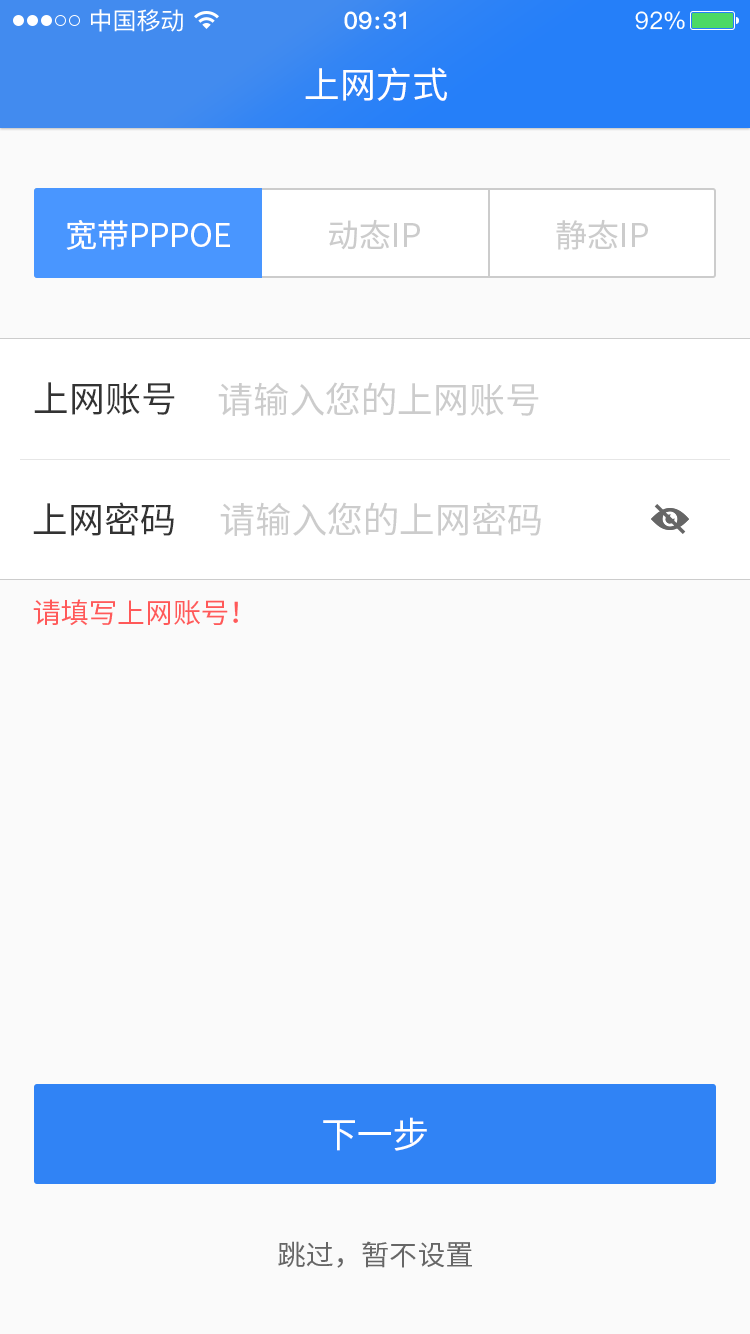
<style>
.page{position:relative;width:750px;height:1334px;background:#fafafa}
.page>*{position:absolute;margin:0}
.t1{font:36px "SourceHanSansCN-Regular";color:#ffffff}
.t2{font:32px "SourceHanSansCN-Regular";color:#ffffff}
.t3{font:32px "SourceHanSansCN-Regular";color:#cccccc}
.t4{font:36px "SourceHanSansCN-Regular";color:#333333}
.t5{font:36px "SourceHanSansCN-Regular";color:#cccccc}
.t6{font:28px "SourceHanSansCN-Regular";color:#ff5959}
.t7{font:28px "SourceHanSansCN-Regular";color:#666666}
</style>
<div class="page">
<p class="t1" style="left:305px;top:67px;width:142px;height:34px">上网方式</p>
<p class="t2" style="left:66px;top:220px;width:164px;height:30px">宽带PPPOE</p>
<p class="t3" style="left:329px;top:219px;width:91px;height:31px">动态IP</p>
<p class="t3" style="left:556px;top:219px;width:92px;height:31px">静态IP</p>
<p class="t4" style="left:34px;top:382px;width:141px;height:33px">上网账号</p>
<p class="t5" style="left:218px;top:382px;width:321px;height:34px">请输入您的上网账号</p>
<p class="t4" style="left:33px;top:502px;width:141px;height:34px">上网密码</p>
<p class="t5" style="left:220px;top:502px;width:321px;height:34px">请输入您的上网密码</p>
<p class="t6" style="left:33px;top:599px;width:205px;height:27px">请填写上网账号！</p>
<p class="t1" style="left:323px;top:1117px;width:104px;height:34px">下一步</p>
<p class="t7" style="left:278px;top:1241px;width:194px;height:27px">跳过，暂不设置</p>
</div>
